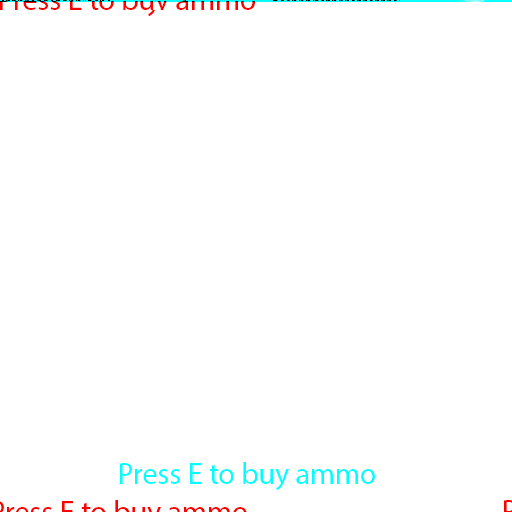
<style>
.page{position:relative;width:512px;height:512px;background:#ffffff}
.page>*{position:absolute;margin:0}
.t1{font:30px "MyriadPro-Regular"}
</style>
<div class="page">
<p class="t1" style="left:120px;top:460px;width:255px;height:29px">Press E to buy ammo</p>
</div>
